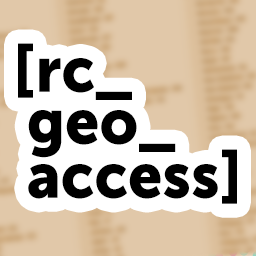
<style>
.page{position:relative;width:256px;height:256px;background:#ffffff}
.page>*{position:absolute;margin:0}
.t1{font:64.1px/53.8px "MuseoSans-900";color:#000000;scale:0.95 1}
.t2{font:64.1px/57.8px "MuseoSans-900";color:#000000;scale:0.95 1}
.t3{font:64.1px/52.2px "MuseoSans-900";color:#000000;scale:0.95 1}
</style>
<div class="page">
<p class="t1" style="left:18px;top:43px;width:219px;height:161px"><span class="t2">[rc_<br></span><span class="t3"> geo_<br></span> access]</p>
</div>
